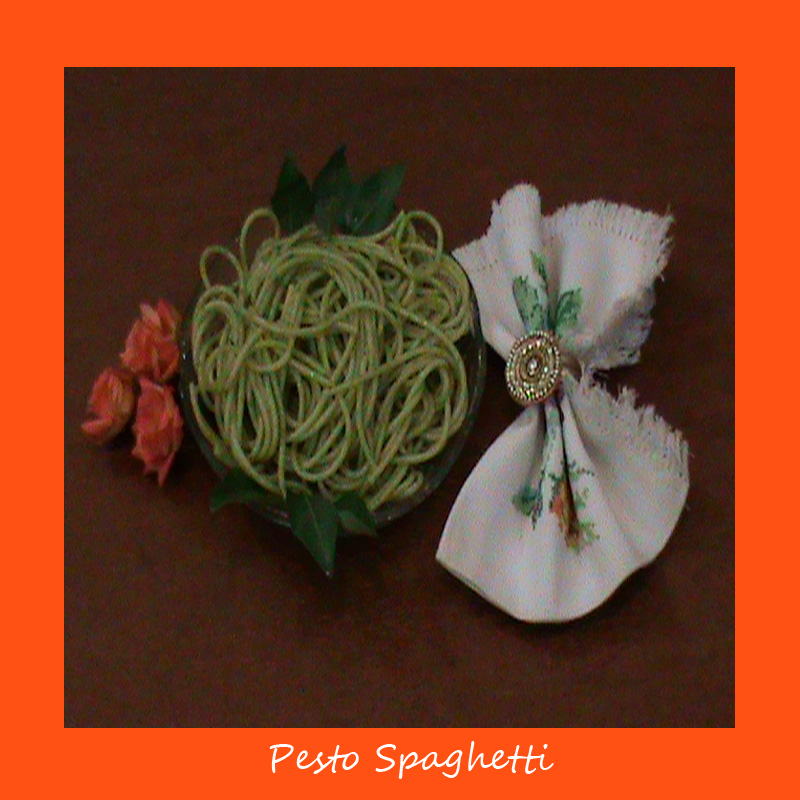
<style>
.page{position:relative;width:800px;height:800px;background:#ff5114}
.page>*{position:absolute;margin:0}
.t1{font:36px "SegoeScript";color:#fffdfd}
</style>
<div class="page">
<p class="t1" style="left:269px;top:741px;width:285px;height:38px">Pesto Spaghetti</p>
</div>
